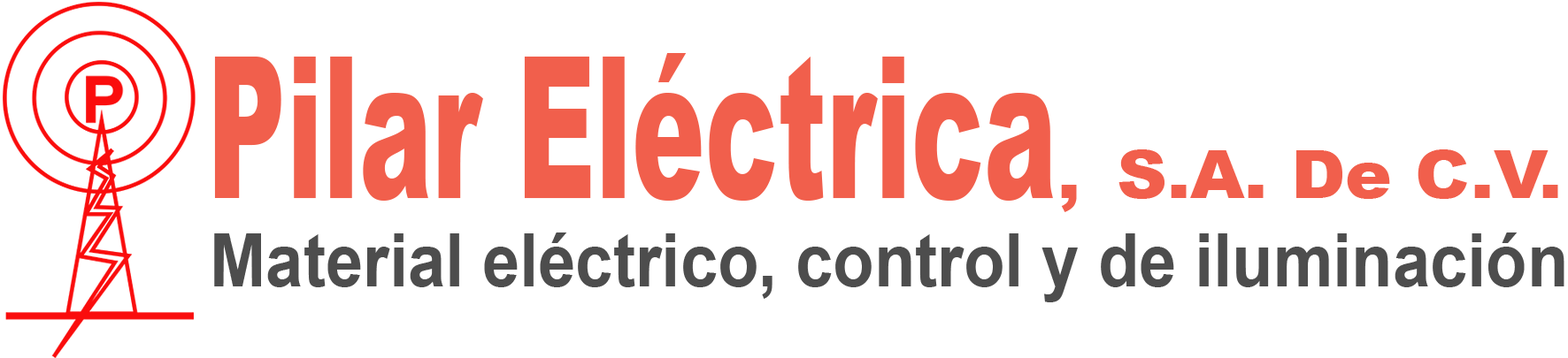
<style>
.page{position:relative;width:1568px;height:358px;background:#ffffff}
.page>*{position:absolute;margin:0}
.t1{font:197.6px "Arial-Black";color:#f15f4c;scale:0.55 1}
.t2{font:66.4px "Arial-Black";color:#f15f4c;scale:1.05 1}
.t3{font:73.7px "Arial-BoldMT";color:#4d4d4d;scale:0.91 1}
</style>
<div class="page">
<p class="t1" style="left:214px;top:53px;width:1344px;height:159px">Pilar Eléctrica<span class="t2">, S.A. De C.V.</span></p>
<p class="t3" style="left:214px;top:233px;width:1350px;height:70px">Material eléctrico, control y de iluminación</p>
</div>
